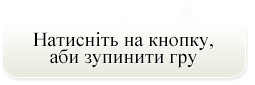
<style>
.page{position:relative;width:255px;height:85px;background:#ffffff}
.page>*{position:absolute;margin:0}
.t1{font:20px/16.7px "TimesNewRomanPSMT";color:#000000}
</style>
<div class="page">
<p class="t1" style="left:33px;top:32px;width:180px;height:36px;text-align:center">Натисніть на кнопку,<br>аби зупинити гру</p>
</div>
